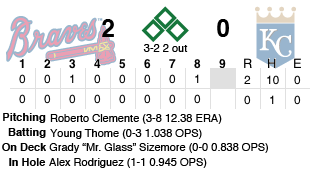
<style>
.page{position:relative;width:320px;height:170px;background:#ffffff}
.page>*{position:absolute;margin:0}
.t1{font:24px "Helvetica-Bold";color:#000000}
.t2{font:11px "Helvetica";color:#000000}
.t3{font:11px "Helvetica-Bold";color:#000000}
</style>
<div class="page">
<p class="t1" style="left:102px;top:19px;width:12px;height:18px">2</p>
<p class="t1" style="left:217px;top:19px;width:12px;height:18px">0</p>
<p class="t2" style="left:143px;top:44px;width:45px;height:8px">3-2 2 out</p>
<p class="t3" style="left:3px;top:113px;width:43px;height:10px">Pitching</p>
<p class="t2" style="left:50px;top:114px;width:172px;height:10px">Roberto Clemente (3-8 12.38 ERA)</p>
<p class="t3" style="left:8px;top:128px;width:38px;height:10px">Batting</p>
<p class="t2" style="left:50px;top:129px;width:152px;height:10px">Young Thome (0-3 1.038 OPS)</p>
<p class="t3" style="left:2px;top:143px;width:44px;height:8px">On Deck</p>
<p class="t2" style="left:49px;top:143px;width:219px;height:10px">Grady “Mr. Glass” Sizemore (0-0 0.838 OPS)</p>
<p class="t3" style="left:9px;top:158px;width:37px;height:8px">In Hole</p>
<p class="t2" style="left:49px;top:158px;width:158px;height:10px">Alex Rodriguez (1-1 0.945 OPS)</p>
</div>
